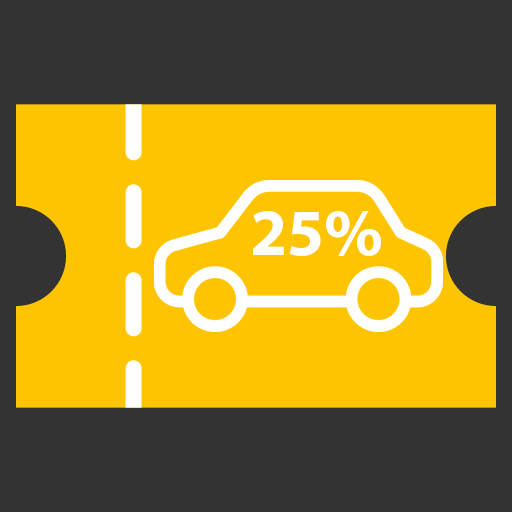
<style>
.page{position:relative;width:512px;height:512px;background:#333333}
.page>*{position:absolute;margin:0}
.t1{font:66.7px "MyriadPro-Bold";color:#ffffff}
</style>
<div class="page">
<p class="t1" style="left:253px;top:211px;width:128px;height:45px">25%</p>
</div>
